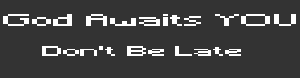
<style>
.page{position:relative;width:300px;height:78px;background:#333333}
.page>*{position:absolute;margin:0}
.t1{font:15.5px "Minecraft";color:#ffffff;scale:2.46 1}
.t2{font:12.5px "Minecraft";color:#ffffff;scale:2.46 1}
</style>
<div class="page">
<p class="t1" style="left:3px;top:14px;width:293px;height:12px">God Awaits YOU</p>
<p class="t2" style="left:42px;top:46px;width:199px;height:10px">Don't Be Late</p>
</div>
